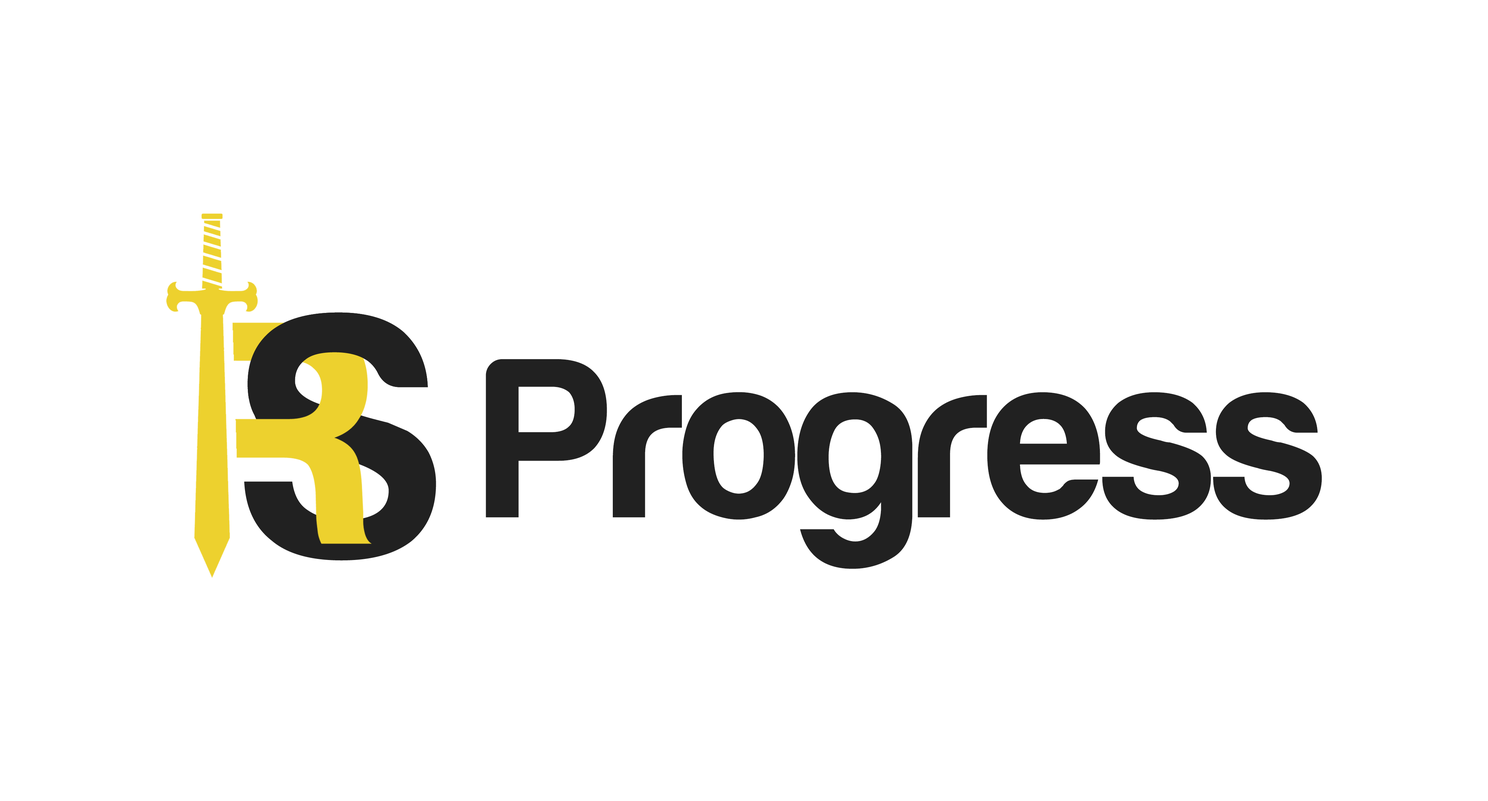
<style>
.page{position:relative;width:1488px;height:801px;background:#ffffff}
.page>*{position:absolute;margin:0}
.t1{font:235.4px "Harabara";color:#212121}
</style>
<div class="page">
<p class="t1" style="left:486px;top:359px;width:836px;height:210px">Progress</p>
</div>
